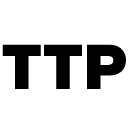
<style>
.page{position:relative;width:128px;height:128px;background:#ffffff}
.page>*{position:absolute;margin:0}
.t1{font:61.9px "HelveticaNeueLTStd-Blk";color:#000000}
</style>
<div class="page">
<p class="t1" style="left:2px;top:44px;width:124px;height:45px">TTP</p>
</div>
